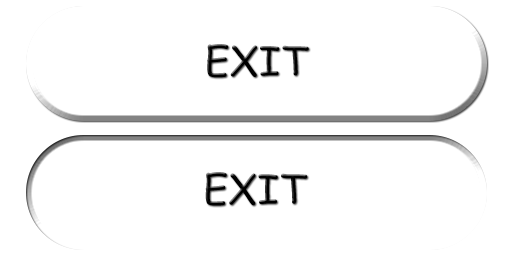
<style>
.page{position:relative;width:512px;height:256px;background:#ffffff}
.page>*{position:absolute;margin:0}
.t1{font:40px "ComicSansMS";color:#000000}
.t2{font:40.3px "ComicSansMS";color:#000000}
</style>
<div class="page">
<p class="t1" style="left:207px;top:44px;width:102px;height:34px">EXIT</p>
<p class="t2" style="left:205px;top:172px;width:103px;height:34px">EXIT</p>
</div>
